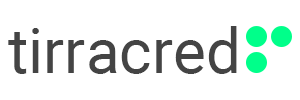
<style>
.page{position:relative;width:300px;height:100px;background:#ffffff}
.page>*{position:absolute;margin:0}
.t1{font:62.3px "Roboto-Regular";color:#444444}
</style>
<div class="page">
<p class="t1" style="left:8px;top:26px;width:229px;height:48px">tirracred</p>
</div>
